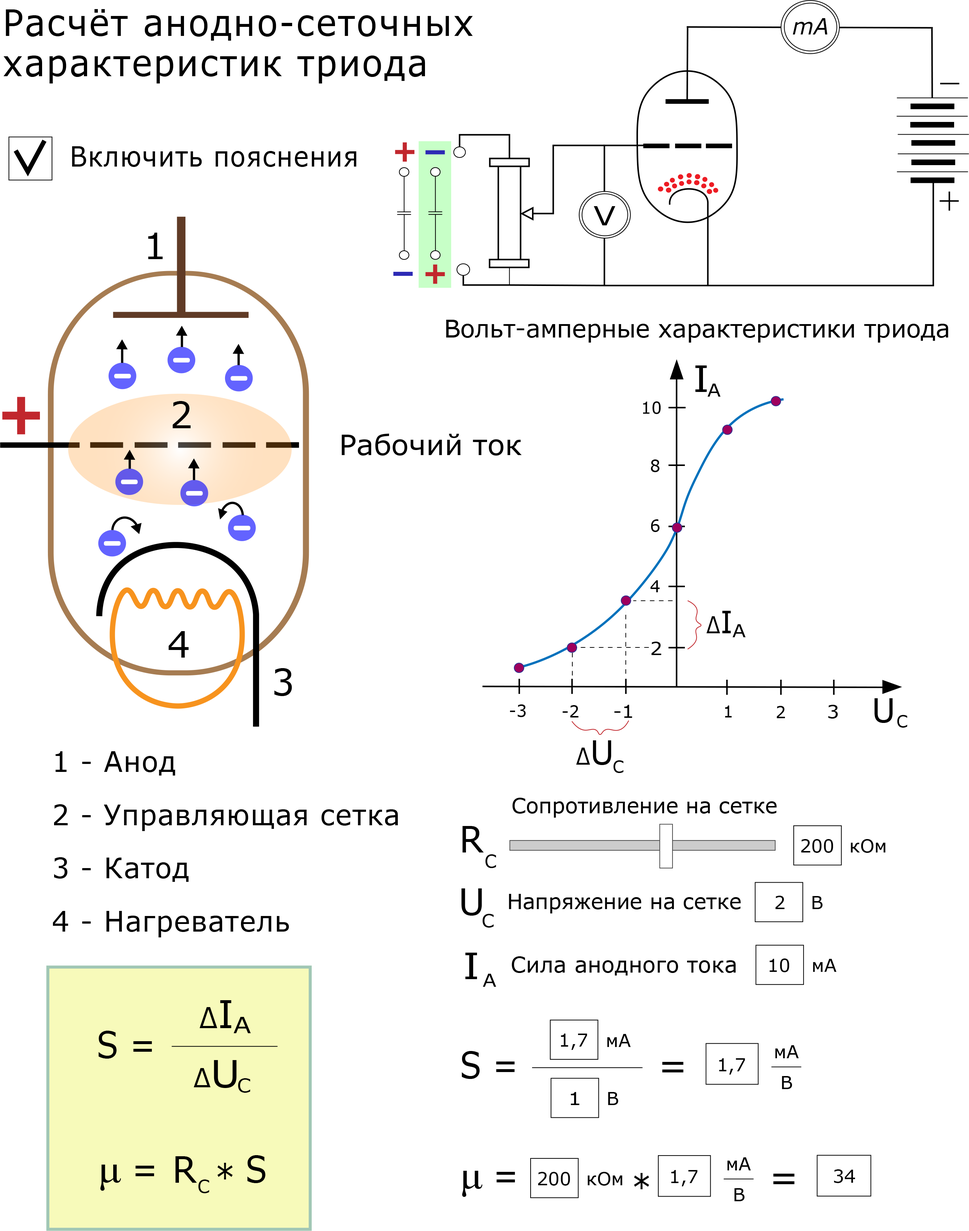
<style>
.page{position:relative;width:969px;height:1231px;background:#ffffff}
.page>*{position:absolute;margin:0}
.t1{font:36.3px/40.1px "Verdana";letter-spacing:0.042em;color:#000000;scale:0.95 1}
.t2{font:22.6px "Verdana-Italic";color:#000000}
.t3{font:27.9px "Verdana";letter-spacing:0.025em;color:#000000;scale:0.92 1}
.t4{font:26.5px "Verdana";color:#000000;scale:1.23 1}
.t5{font:36.3px "Verdana";letter-spacing:0.042em;color:#000000}
.t6{font:24.6px "Verdana";letter-spacing:-0.008em;color:#000000}
.t7{font:36.3px "Verdana";color:#000000;scale:1.08 1}
.t8{font:18.1px "Verdana";color:#000000;scale:1.08 1}
.t9{font:16.6px "Verdana";color:#000000}
.t10{font:28.1px "Verdana";color:#000000}
.t11{font:23.3px "Verdana";color:#000000;scale:0.85 1}
.t12{font:30.8px "Verdana";color:#000000;scale:0.94 1}
.t13{font:33.2px "Verdana";color:#000000}
.t14{font:23.3px "Verdana";color:#000000;scale:0.86 1}
.t15{font:28.2px/26.6px "Verdana";letter-spacing:0.025em;color:#000000}
.t16{font:21.2px "Verdana";letter-spacing:-0.008em;color:#000000}
.t17{font:36.3px "Verdana";letter-spacing:-0.008em;color:#000000;scale:0.97 1}
.t18{font:18.1px "Verdana";letter-spacing:-0.008em;color:#000000}
.t19{font:18.1px "Verdana";color:#000000}
.t20{font:18.1px "Verdana";color:#000000;scale:0.97 1}
.t21{font:36.3px "Verdana";color:#000000}
.t22{font:36.3px "Verdana";color:#000000;scale:1.11 1}
.t23{font:21.9px "Verdana";color:#000000}
.t24{font:18.1px "Verdana";color:#000000;scale:1.1 1}
.t25{font:29.2px "Verdana";color:#000000;scale:0.9 1}
.t26{font:38.4px "Verdana";color:#000000}
.t27{font:22.7px "Verdana";color:#000000;scale:1.14 1}
.t28{font:36.5px "Verdana";color:#000000;scale:0.88 1}
.t29{font:26.3px "Verdana";color:#000000;scale:0.94 1}
.t30{font:37.5px "Verdana";color:#000000;scale:1.07 1}
.t31{font:36.3px "Verdana";color:#000000;scale:0.87 1}
.t32{font:18.8px "Verdana";color:#000000;scale:1.06 1}
.t33{font:18.1px "Verdana";letter-spacing:-0.008em;color:#000000;scale:1.18 1}
.t34{font:36.5px "Verdana";letter-spacing:-0.008em;color:#000000}
.t35{font:39.4px "MyriadPro-Regular";color:#000000;scale:1.09 1}
.t36{font:18.3px "Verdana";color:#000000}
.t37{font:39.1px "MyriadPro-Regular";color:#000000;scale:1.08 1}
</style>
<div class="page">
<p class="t1" style="left:3px;top:9px;width:470px;height:74px">Расчёт анодно-сеточных <br>характеристик триода</p>
<p class="t2" style="left:792px;top:18px;width:35px;height:16px">mA</p>
<p class="t3" style="left:72px;top:146px;width:284px;height:21px">Включить пояснения</p>
<p class="t4" style="left:594px;top:206px;width:21px;height:19px">V</p>
<p class="t5" style="left:148px;top:233px;width:15px;height:26px">1</p>
<p class="t6" style="left:446px;top:320px;width:502px;height:23px">Вольт-амперные характеристики триода</p>
<p class="t7" style="left:695px;top:365px;width:12px;height:27px">I</p>
<p class="t8" style="left:707px;top:384px;width:14px;height:13px">A</p>
<p class="t5" style="left:172px;top:401px;width:19px;height:27px">2</p>
<p class="t9" style="left:643px;top:401px;width:18px;height:13px">10</p>
<p class="t10" style="left:341px;top:433px;width:180px;height:23px">Рабочий ток</p>
<p class="t9" style="left:651px;top:459px;width:8px;height:13px">8</p>
<p class="t9" style="left:651px;top:519px;width:9px;height:13px">6</p>
<p class="t9" style="left:650px;top:580px;width:10px;height:12px">4</p>
<p class="t11" style="left:706px;top:611px;width:25px;height:22px">Δ<span class="t12">I</span></p>
<p class="t8" style="left:732px;top:624px;width:14px;height:13px">A</p>
<p class="t5" style="left:168px;top:631px;width:21px;height:26px">4</p>
<p class="t8" style="left:651px;top:642px;width:10px;height:13px">2</p>
<p class="t5" style="left:274px;top:668px;width:18px;height:28px">3</p>
<p class="t13" style="left:874px;top:698px;width:19px;height:25px">U</p>
<p class="t9" style="left:510px;top:704px;width:16px;height:13px">-3</p>
<p class="t9" style="left:562px;top:705px;width:16px;height:12px">-2</p>
<p class="t8" style="left:614px;top:705px;width:18px;height:13px">-1</p>
<p class="t9" style="left:725px;top:705px;width:7px;height:12px">1</p>
<p class="t9" style="left:777px;top:706px;width:8px;height:12px">2</p>
<p class="t8" style="left:828px;top:705px;width:10px;height:13px">3</p>
<p class="t9" style="left:897px;top:715px;width:10px;height:13px">C</p>
<p class="t14" style="left:576px;top:740px;width:35px;height:25px">Δ<span class="t13">U</span></p>
<p class="t15" style="left:53px;top:751px;width:345px;height:186px">1 - Анод<br><br>2 - Управляющая сетка<br><br>3 - Катод<br><br>4 - Нагреватель</p>
<p class="t9" style="left:613px;top:760px;width:10px;height:13px">C</p>
<p class="t16" style="left:512px;top:798px;width:265px;height:20px">Сопротивление на сетке</p>
<p class="t17" style="left:462px;top:826px;width:22px;height:26px">R</p>
<p class="t18" style="left:801px;top:839px;width:32px;height:14px">200</p>
<p class="t19" style="left:851px;top:839px;width:34px;height:14px">кОм</p>
<p class="t20" style="left:485px;top:854px;width:11px;height:14px">C</p>
<p class="t21" style="left:461px;top:888px;width:21px;height:27px">U</p>
<p class="t16" style="left:509px;top:894px;width:232px;height:19px">Напряжение на сетке</p>
<p class="t18" style="left:775px;top:896px;width:9px;height:13px">2</p>
<p class="t19" style="left:812px;top:896px;width:11px;height:13px">В</p>
<p class="t19" style="left:482px;top:914px;width:11px;height:13px">C</p>
<p class="t22" style="left:465px;top:952px;width:12px;height:27px">I</p>
<p class="t23" style="left:512px;top:956px;width:224px;height:19px">Сила анодного тока</p>
<p class="t18" style="left:769px;top:958px;width:20px;height:14px">10</p>
<p class="t19" style="left:813px;top:959px;width:23px;height:13px">мА</p>
<p class="t24" style="left:483px;top:974px;width:13px;height:13px">А</p>
<p class="t25" style="left:200px;top:1000px;width:32px;height:28px">Δ<span class="t26">I</span></p>
<p class="t27" style="left:233px;top:1017px;width:18px;height:16px">A</p>
<p class="t28" style="left:98px;top:1031px;width:54px;height:27px">S =</p>
<p class="t18" style="left:561px;top:1033px;width:26px;height:17px">1,7</p>
<p class="t19" style="left:607px;top:1034px;width:24px;height:13px">мА</p>
<p class="t19" style="left:775px;top:1045px;width:24px;height:13px">мА</p>
<p class="t29" style="left:193px;top:1060px;width:44px;height:28px">Δ<span class="t30">U</span></p>
<p class="t31" style="left:462px;top:1051px;width:53px;height:28px">S =</p>
<p class="t21" style="left:662px;top:1062px;width:21px;height:10px">=</p>
<p class="t18" style="left:719px;top:1058px;width:26px;height:16px">1,7</p>
<p class="t32" style="left:238px;top:1078px;width:12px;height:15px">C</p>
<p class="t19" style="left:782px;top:1076px;width:10px;height:13px">В</p>
<p class="t33" style="left:571px;top:1092px;width:8px;height:13px">1</p>
<p class="t19" style="left:608px;top:1092px;width:10px;height:13px">В</p>
<p class="t34" style="left:175px;top:1156px;width:22px;height:27px">R</p>
<p class="t28" style="left:247px;top:1155px;width:19px;height:28px">S</p>
<p class="t19" style="left:727px;top:1157px;width:24px;height:13px">мА</p>
<p class="t35" style="left:100px;top:1164px;width:54px;height:27px">μ <span class="t28">=</span></p>
<p class="t28" style="left:217px;top:1163px;width:16px;height:16px">*</p>
<p class="t18" style="left:671px;top:1170px;width:26px;height:16px">1,7</p>
<p class="t18" style="left:834px;top:1169px;width:21px;height:14px">34</p>
<p class="t36" style="left:198px;top:1179px;width:11px;height:14px">C</p>
<p class="t37" style="left:462px;top:1171px;width:53px;height:26px">μ <span class="t31">=</span></p>
<p class="t18" style="left:538px;top:1172px;width:32px;height:13px">200</p>
<p class="t19" style="left:587px;top:1172px;width:35px;height:13px">кОм</p>
<p class="t31" style="left:634px;top:1173px;width:15px;height:16px">*</p>
<p class="t21" style="left:773px;top:1173px;width:21px;height:11px">=</p>
<p class="t19" style="left:734px;top:1188px;width:11px;height:13px">В</p>
</div>
